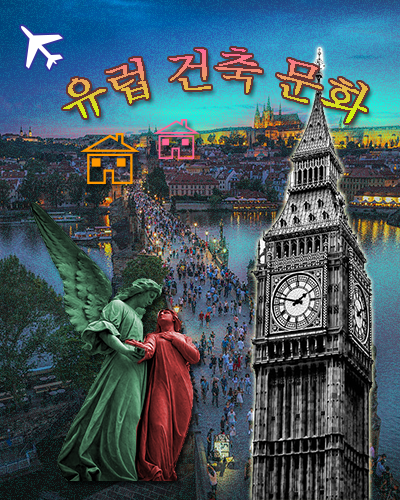
<style>
.page{position:relative;width:400px;height:500px}
.page>*{position:absolute;margin:0}
.t1{font:45px "Batang";letter-spacing:-0.05em}
</style>
<div class="page">
<p class="t1" style="left:63px;top:48px;width:305px;height:75px">유럽 건축 문화</p>
</div>
